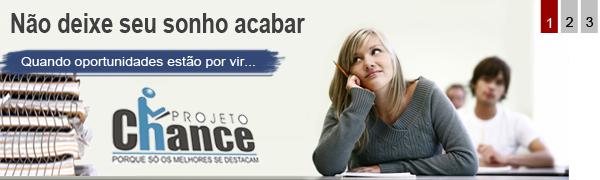
<style>
.page{position:relative;width:600px;height:180px}
.page>*{position:absolute;margin:0}
.t1{font:27.2px "Arial-BoldMT";color:#403f3f;scale:0.8 1}
.t2{font:14px "ArialMT";color:#ffffff}
.t3{font:14px "ArialMT";color:#000000}
.t4{font:11.7px "ArialMT";color:#ffffff;scale:1.19 1}
</style>
<div class="page">
<p class="t1" style="left:11px;top:13px;width:294px;height:20px">Não deixe seu sonho acabar</p>
<p class="t2" style="left:547px;top:17px;width:5px;height:10px">1</p>
<p class="t3" style="left:566px;top:17px;width:7px;height:10px">2</p>
<p class="t3" style="left:586px;top:17px;width:7px;height:10px">3</p>
<p class="t2" style="left:547px;top:18px;width:5px;height:10px">1</p>
<p class="t4" style="left:21px;top:56px;width:234px;height:12px">Quando oportunidades estão por vir...</p>
</div>
